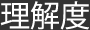
<style>
.page{position:relative;width:90px;height:30px;background:#333333}
.page>*{position:absolute;margin:0}
.t1{font:30px "KozGoPr6N-Regular";color:#ffffff}
</style>
<div class="page">
<p class="t1" style="left:0px;top:1px;width:89px;height:29px">理解度</p>
</div>
